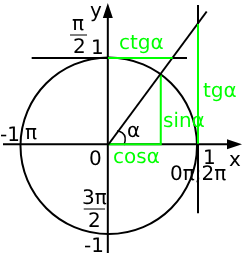
<style>
.page{position:relative;width:246px;height:256px;background:#ffffff}
.page>*{position:absolute;margin:0}
.t1{font:20px "DejaVuSans";color:#000000}
.t2{font:20px "DejaVuSans";color:#00ff00}
</style>
<div class="page">
<p class="t1" style="left:90px;top:6px;width:12px;height:16px">y</p>
<p class="t1" style="left:72px;top:19px;width:12px;height:12px">π</p>
<p class="t1" style="left:74px;top:38px;width:10px;height:15px">2</p>
<p class="t1" style="left:93px;top:39px;width:9px;height:15px">1</p>
<p class="t2" style="left:120px;top:34px;width:43px;height:20px">ctgα</p>
<p class="t2" style="left:203px;top:82px;width:33px;height:20px">tgα</p>
<p class="t2" style="left:164px;top:111px;width:40px;height:17px">sinα</p>
<p class="t1" style="left:0px;top:126px;width:19px;height:15px">-1</p>
<p class="t1" style="left:128px;top:125px;width:12px;height:13px">α</p>
<p class="t1" style="left:25px;top:128px;width:12px;height:12px">π</p>
<p class="t1" style="left:90px;top:150px;width:11px;height:16px">0</p>
<p class="t1" style="left:205px;top:149px;width:9px;height:15px">1</p>
<p class="t2" style="left:114px;top:151px;width:45px;height:13px">cosα</p>
<p class="t1" style="left:229px;top:155px;width:12px;height:11px">x</p>
<p class="t1" style="left:171px;top:165px;width:55px;height:18px">0π;2π</p>
<p class="t1" style="left:83px;top:189px;width:24px;height:16px">3π</p>
<p class="t1" style="left:89px;top:212px;width:10px;height:15px">2</p>
<p class="t1" style="left:84px;top:237px;width:19px;height:15px">-1</p>
</div>
